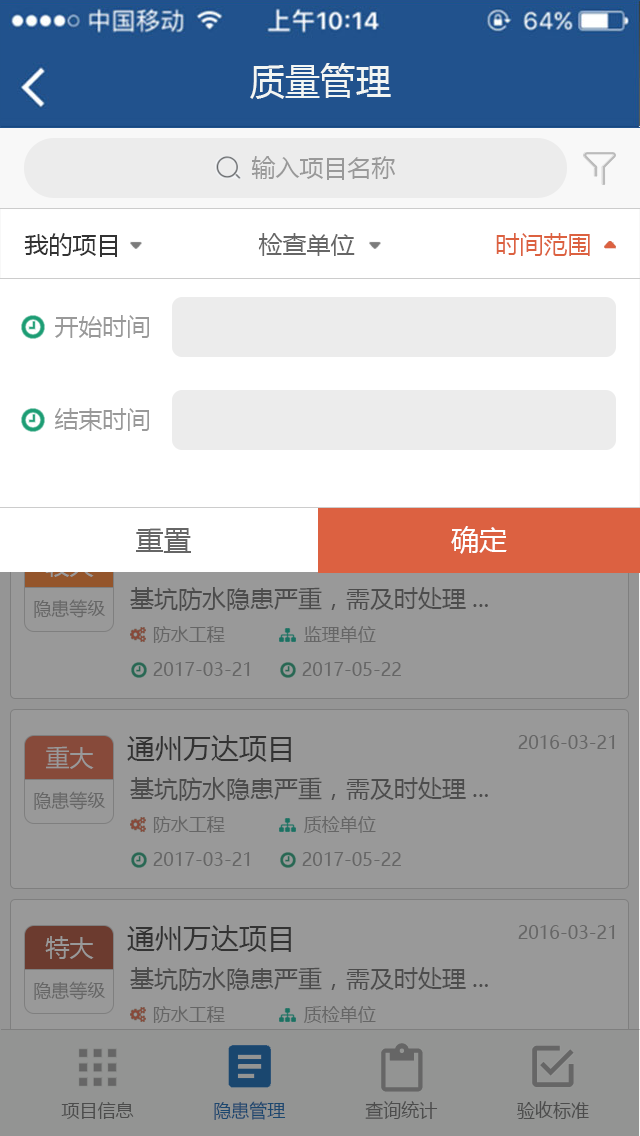
<style>
.page{position:relative;width:640px;height:1136px;background:#999999}
.page>*{position:absolute;margin:0}
.t1{font:36px "MicrosoftYaHei";color:#f3f6f3}
.t2{font:24px "MicrosoftYaHei";color:#999999}
.t3{font:24px "MicrosoftYaHei";color:#333333}
.t4{font:24px "MicrosoftYaHei";color:#666666}
.t5{font:24px "MicrosoftYaHei";color:#dc6140}
.t6{font:28px "MicrosoftYaHei";color:#666666}
.t7{font:28px "MicrosoftYaHei";color:#ffffff}
.t8{font:24px "MicrosoftYaHei";color:#4c4c4c}
.t9{font:18px "MicrosoftYaHei";color:#666666}
.t10{font:28px "MicrosoftYaHei";color:#333333}
.t11{font:18px "MicrosoftYaHei";color:#4c4c4c}
</style>
<div class="page">
<p class="t1" style="left:250px;top:63px;width:141px;height:36px">质量管理</p>
<p class="t2" style="left:251px;top:156px;width:144px;height:24px">输入项目名称</p>
<p class="t3" style="left:24px;top:233px;width:93px;height:24px">我的项目</p>
<p class="t4" style="left:258px;top:233px;width:97px;height:23px">检查单位</p>
<p class="t5" style="left:496px;top:233px;width:94px;height:23px">时间范围</p>
<p class="t2" style="left:55px;top:315px;width:94px;height:23px">开始时间</p>
<p class="t2" style="left:54px;top:408px;width:95px;height:23px">结束时间</p>
<p class="t6" style="left:136px;top:528px;width:55px;height:25px">重置</p>
<p class="t7" style="left:451px;top:526px;width:56px;height:28px">确定</p>
<p class="t8" style="left:130px;top:587px;width:358px;height:24px">基坑防水隐患严重，需及时处理...</p>
<p class="t9" style="left:34px;top:599px;width:72px;height:19px">隐患等级</p>
<p class="t9" style="left:153px;top:626px;width:72px;height:17px">防水工程</p>
<p class="t9" style="left:304px;top:626px;width:72px;height:17px">监理单位</p>
<p class="t9" style="left:153px;top:662px;width:97px;height:14px">2017-03-21</p>
<p class="t9" style="left:302px;top:662px;width:99px;height:14px">2017-05-22</p>
<p class="t10" style="left:127px;top:735px;width:164px;height:27px">通州万达项目</p>
<p class="t9" style="left:518px;top:735px;width:97px;height:14px">2016-03-21</p>
<p class="t2" style="left:46px;top:746px;width:48px;height:23px">重大</p>
<p class="t8" style="left:130px;top:777px;width:358px;height:24px">基坑防水隐患严重，需及时处理...</p>
<p class="t9" style="left:34px;top:791px;width:72px;height:19px">隐患等级</p>
<p class="t9" style="left:153px;top:816px;width:72px;height:17px">防水工程</p>
<p class="t9" style="left:303px;top:816px;width:73px;height:17px">质检单位</p>
<p class="t9" style="left:153px;top:852px;width:97px;height:14px">2017-03-21</p>
<p class="t9" style="left:302px;top:852px;width:99px;height:14px">2017-05-22</p>
<p class="t10" style="left:127px;top:925px;width:164px;height:27px">通州万达项目</p>
<p class="t9" style="left:518px;top:925px;width:97px;height:14px">2016-03-21</p>
<p class="t2" style="left:45px;top:936px;width:49px;height:23px">特大</p>
<p class="t8" style="left:130px;top:967px;width:358px;height:24px">基坑防水隐患严重，需及时处理...</p>
<p class="t9" style="left:34px;top:981px;width:72px;height:19px">隐患等级</p>
<p class="t9" style="left:153px;top:1006px;width:72px;height:17px">防水工程</p>
<p class="t9" style="left:303px;top:1006px;width:73px;height:17px">质检单位</p>
<p class="t11" style="left:61px;top:1101px;width:528px;height:19px">项目信息               隐患管理               查询统计               验收标准</p>
</div>
